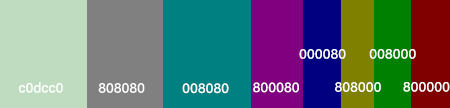
<style>
.page{position:relative;width:450px;height:108px}
.page>*{position:absolute;margin:0}
.t1{font:14px "AcuminConcept-Regular";color:#ffffff}
</style>
<div class="page">
<p class="t1" style="left:299px;top:49px;width:47px;height:10px">000080</p>
<p class="t1" style="left:369px;top:49px;width:47px;height:10px">008000</p>
<p class="t1" style="left:19px;top:82px;width:44px;height:11px">c0dcc0</p>
<p class="t1" style="left:98px;top:83px;width:47px;height:10px">808080</p>
<p class="t1" style="left:182px;top:83px;width:47px;height:11px">008080</p>
<p class="t1" style="left:253px;top:82px;width:46px;height:11px">800080</p>
<p class="t1" style="left:335px;top:82px;width:46px;height:10px">808000</p>
<p class="t1" style="left:403px;top:82px;width:47px;height:10px">800000</p>
</div>
